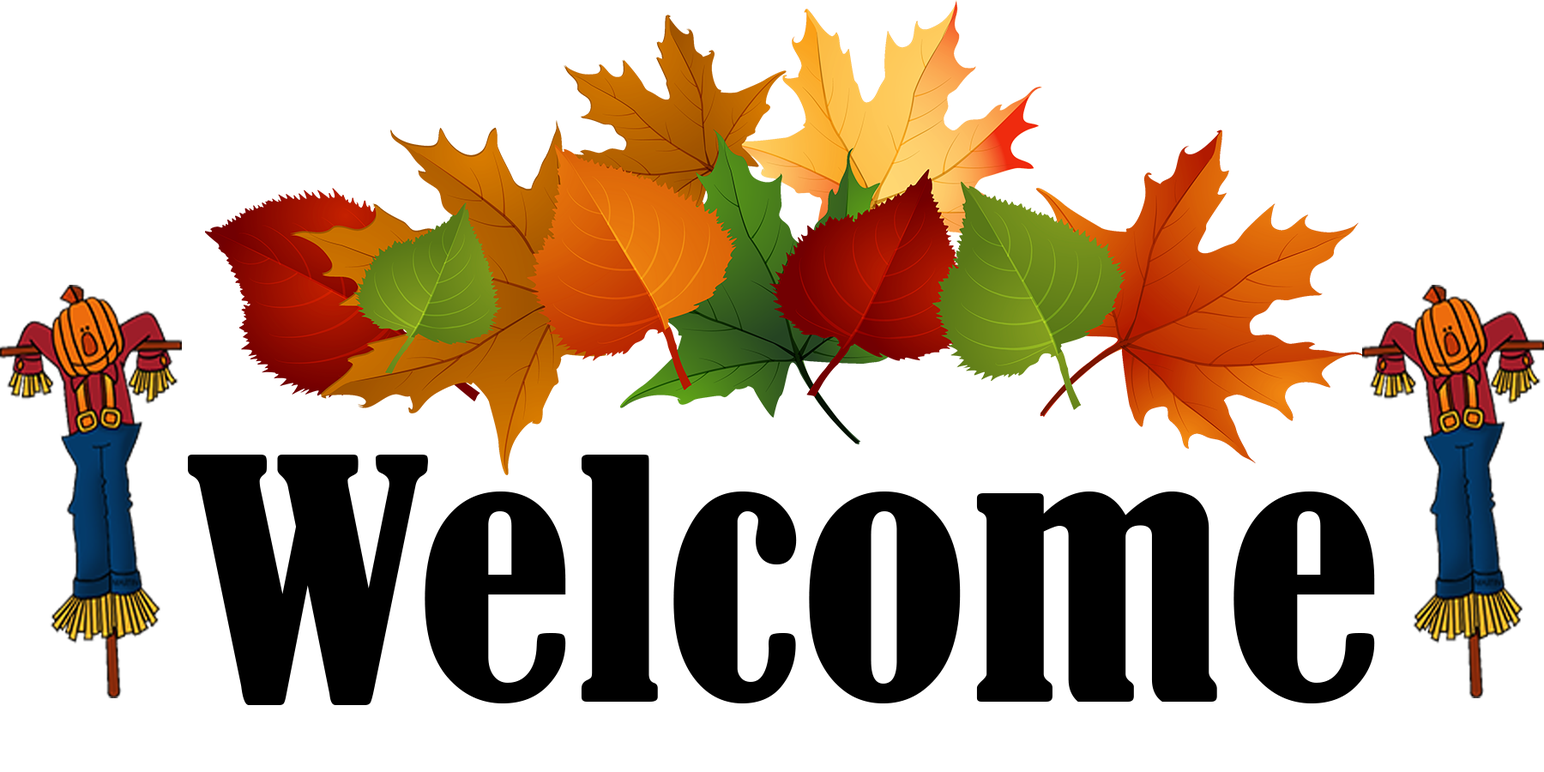
<style>
.page{position:relative;width:1544px;height:772px;background:#ffffff}
.page>*{position:absolute;margin:0}
.t1{font:312.8px "BernardMT-Condensed";color:#000000;scale:1.12 1}
</style>
<div class="page">
<p class="t1" style="left:188px;top:455px;width:1187px;height:250px">Welcome</p>
</div>
